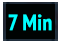
<style>
.page{position:relative;width:61px;height:43px;background:#000302}
.page>*{position:absolute;margin:0}
.t1{font:22px "PTSans-NarrowBold";letter-spacing:0.01em;color:#00ffff}
</style>
<div class="page">
<p class="t1" style="left:8px;top:14px;width:44px;height:17px">7 Min</p>
</div>
